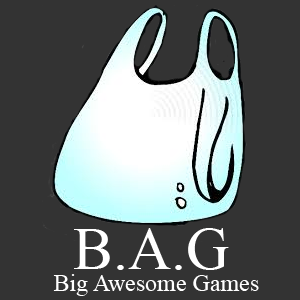
<style>
.page{position:relative;width:300px;height:300px;background:#333333}
.page>*{position:absolute;margin:0}
.t1{font:60px "TimesNewRomanPSMT";color:#ffffff}
.t2{font:24px "TimesNewRomanPSMT";color:#ffffff}
</style>
<div class="page">
<p class="t1" style="left:74px;top:228px;width:155px;height:42px">B.A.G</p>
<p class="t2" style="left:53px;top:274px;width:206px;height:22px">Big Awesome Games</p>
</div>
